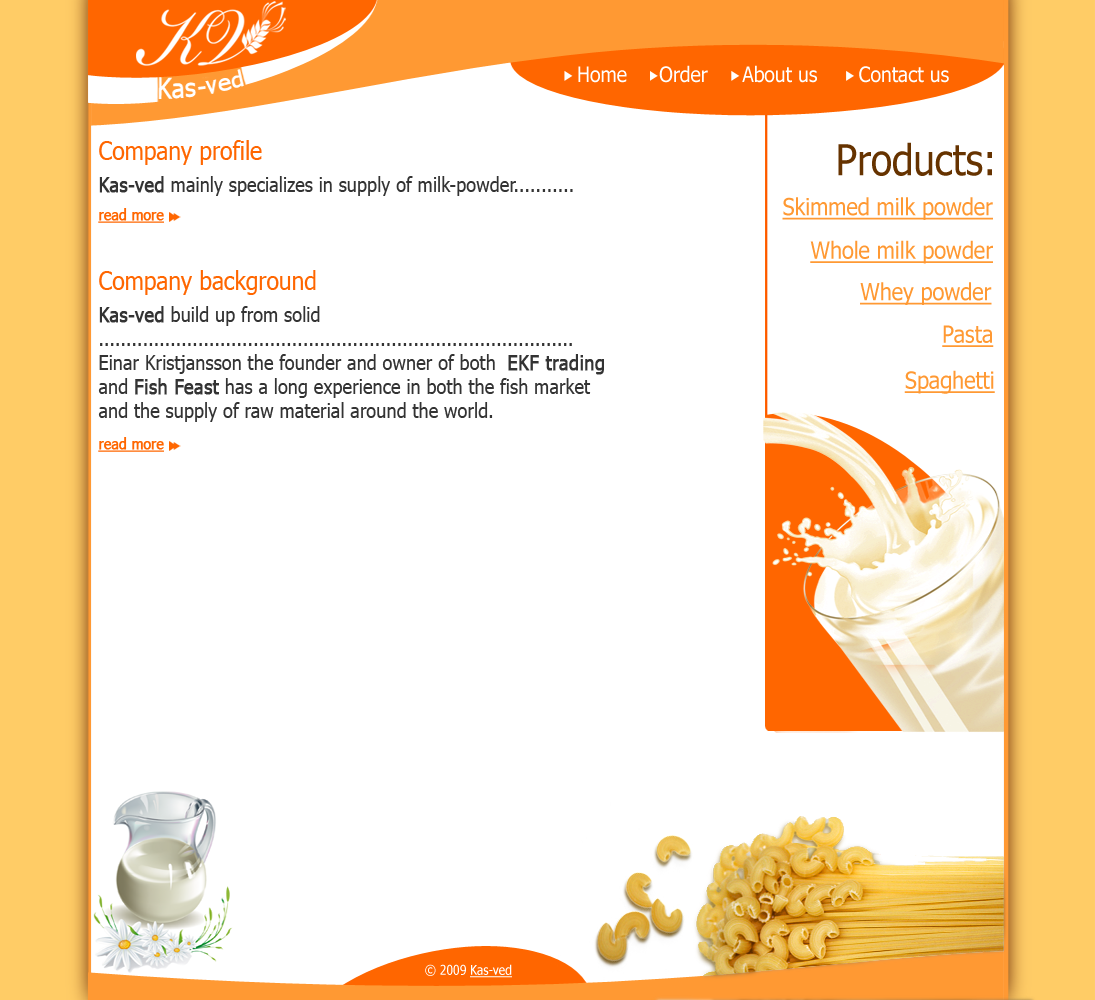
<style>
.page{position:relative;width:1095px;height:1000px;background:#ffffff}
.page>*{position:absolute;margin:0}
.t1{font:21.2px "Tahoma";color:#ffffff;scale:0.91 1}
.t2{font:25px "Tahoma";color:#ff6600;scale:0.91 1}
.t3{font:42.4px "Tahoma";color:#663300;scale:0.91 1}
.t4{font:20px "Tahoma";color:#333333;scale:0.91 1}
.t5{font:20px "Tahoma";color:#333333;font-weight:bold;scale:0.91 1}
.t6{font:23.7px "Tahoma";color:#ff9933;text-decoration:underline;scale:0.91 1}
.t7{font:15px "Tahoma";color:#ff6600;font-weight:bold;text-decoration:underline;scale:0.91 1}
.t8{font:20px/24px "Tahoma";color:#333333;scale:0.91 1}
.t9{font:20px/24px "Tahoma";color:#333333;font-weight:bold;scale:0.91 1}
.t10{font:13.3px "Tahoma";color:#ffffff;text-decoration:underline;scale:0.91 1}
.t11{font:13.3px "Tahoma";color:#ffffff;scale:0.91 1}
</style>
<div class="page">
<p class="t1" style="left:659px;top:65px;width:49px;height:18px">Order</p>
<p class="t1" style="left:742px;top:65px;width:75px;height:18px">About us</p>
<p class="t1" style="left:578px;top:66px;width:49px;height:17px">Home</p>
<p class="t1" style="left:859px;top:66px;width:90px;height:17px">Contact us</p>
<p class="t2" style="left:99px;top:140px;width:163px;height:25px">Company profile</p>
<p class="t3" style="left:838px;top:142px;width:154px;height:34px">Products:</p>
<p class="t4" style="left:99px;top:176px;width:474px;height:20px"><span class="t5">Kas-ved</span> mainly specializes in supply of milk-powder...........</p>
<p class="t6" style="left:782px;top:197px;width:211px;height:23px">Skimmed milk powder</p>
<p class="t7" style="left:98px;top:208px;width:66px;height:15px">read more</p>
<p class="t6" style="left:810px;top:240px;width:183px;height:24px">Whole milk powder</p>
<p class="t2" style="left:99px;top:270px;width:217px;height:25px">Company background</p>
<p class="t6" style="left:860px;top:282px;width:132px;height:23px">Whey powder</p>
<p class="t8" style="left:98px;top:306px;width:506px;height:116px"><span class="t9">Kas-ved</span> build up from solid<br>......................................................................................<br>Einar Kristjansson the founder and owner of both  <span class="t9">EKF trading<br></span>and <span class="t9">Fish Feast</span> has a long experience in both the fish market <br>and the supply of raw material around the world.</p>
<p class="t6" style="left:942px;top:325px;width:52px;height:22px">Pasta</p>
<p class="t6" style="left:904px;top:370px;width:91px;height:24px">Spaghetti</p>
<p class="t7" style="left:98px;top:437px;width:66px;height:15px">read more</p>
<p class="t10" style="left:425px;top:964px;width:87px;height:14px"><span class="t11">© 2009 </span>Kas-ved</p>
</div>
